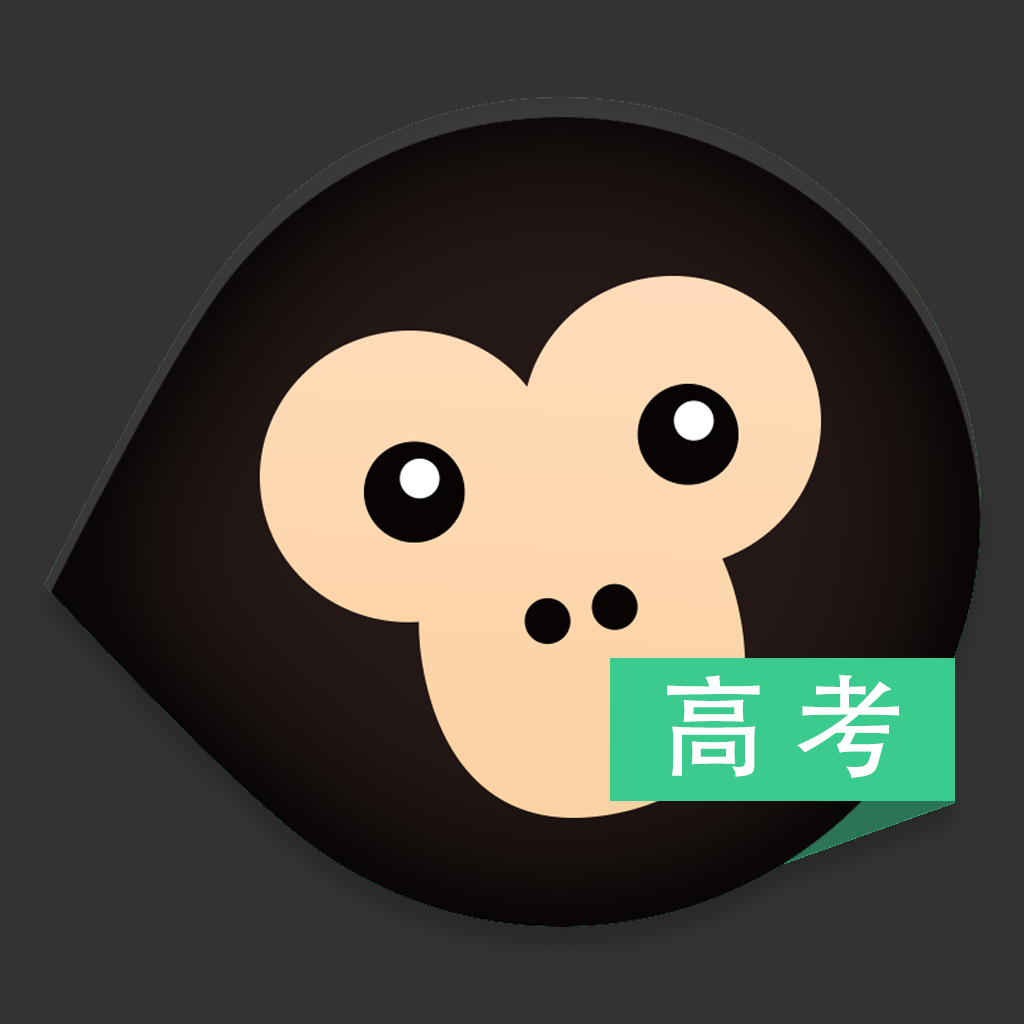
<style>
.page{position:relative;width:1024px;height:1024px;background:#333333}
.page>*{position:absolute;margin:0}
.t1{font:110px "AdobeHeitiStd-Regular";color:#ffffff}
</style>
<div class="page">
<p class="t1" style="left:667px;top:674px;width:232px;height:104px">高 考</p>
</div>
